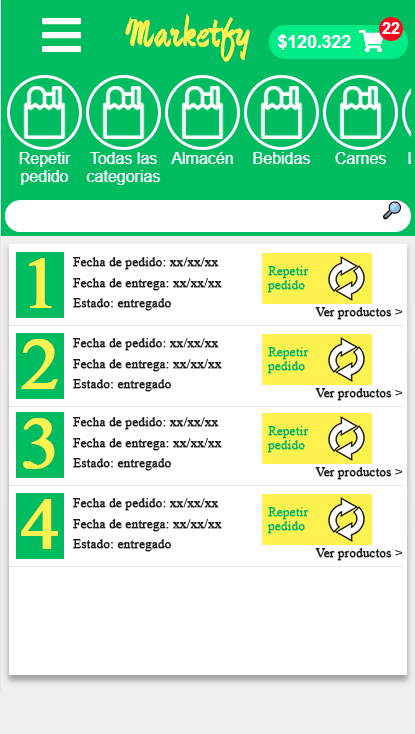
<style>
.page{position:relative;width:415px;height:734px;background:#ffffff}
.page>*{position:absolute;margin:0}
.t1{font:12px "TimesNewRomanPSMT";color:#1e1e1e;font-weight:bold;scale:1.07 1}
.t2{font:72px "TimesNewRomanPSMT";color:#fff250;font-weight:bold;scale:1.07 1}
.t3{font:12px "TimesNewRomanPSMT";color:#00bc61;font-weight:bold;scale:1.07 1}
.t4{font:12.3px "TimesNewRomanPSMT";color:#1e1e1e;font-weight:bold;scale:1.04 1}
</style>
<div class="page">
<p class="t1" style="left:73px;top:257px;width:146px;height:13px">Fecha de pedido: xx/xx/xx</p>
<p class="t2" style="left:29px;top:258px;width:23px;height:50px">1</p>
<p class="t3" style="left:267px;top:266px;width:42px;height:27px">Repetir<br>pedido</p>
<p class="t1" style="left:73px;top:278px;width:149px;height:13px">Fecha de entrega: xx/xx/xx</p>
<p class="t1" style="left:73px;top:298px;width:98px;height:13px">Estado: entregado</p>
<p class="t4" style="left:315px;top:307px;width:88px;height:13px">Ver productos &gt;</p>
<p class="t2" style="left:21px;top:339px;width:37px;height:50px">2</p>
<p class="t1" style="left:73px;top:338px;width:146px;height:13px">Fecha de pedido: xx/xx/xx</p>
<p class="t3" style="left:267px;top:347px;width:42px;height:27px">Repetir<br>pedido</p>
<p class="t1" style="left:73px;top:359px;width:149px;height:13px">Fecha de entrega: xx/xx/xx</p>
<p class="t1" style="left:73px;top:379px;width:98px;height:13px">Estado: entregado</p>
<p class="t4" style="left:315px;top:388px;width:88px;height:13px">Ver productos &gt;</p>
<p class="t2" style="left:23px;top:418px;width:32px;height:51px">3</p>
<p class="t1" style="left:73px;top:417px;width:146px;height:13px">Fecha de pedido: xx/xx/xx</p>
<p class="t1" style="left:73px;top:438px;width:149px;height:13px">Fecha de entrega: xx/xx/xx</p>
<p class="t3" style="left:267px;top:426px;width:42px;height:27px">Repetir<br>pedido</p>
<p class="t1" style="left:73px;top:458px;width:98px;height:13px">Estado: entregado</p>
<p class="t4" style="left:315px;top:467px;width:88px;height:13px">Ver productos &gt;</p>
<p class="t2" style="left:21px;top:499px;width:37px;height:50px">4</p>
<p class="t1" style="left:73px;top:498px;width:146px;height:13px">Fecha de pedido: xx/xx/xx</p>
<p class="t3" style="left:267px;top:507px;width:42px;height:27px">Repetir<br>pedido</p>
<p class="t1" style="left:73px;top:519px;width:149px;height:13px">Fecha de entrega: xx/xx/xx</p>
<p class="t1" style="left:73px;top:539px;width:98px;height:13px">Estado: entregado</p>
<p class="t4" style="left:315px;top:548px;width:88px;height:13px">Ver productos &gt;</p>
</div>
